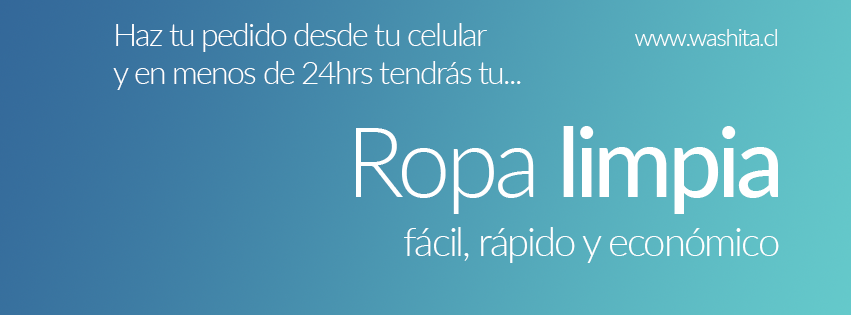
<style>
.page{position:relative;width:851px;height:315px}
.page>*{position:absolute;margin:0}
.t1{font:32px "Lato-Light";letter-spacing:-0.05em;color:#ffffff}
.t2{font:24px "Lato-Light";letter-spacing:-0.05em;color:#ffffff}
.t3{font:96px "Lato-Medium";letter-spacing:-0.05em;color:#ffffff}
.t4{font:96px "Lato-Light";letter-spacing:-0.05em;color:#ffffff}
.t5{font:40px "Lato-Light";letter-spacing:-0.05em;color:#ffffff}
</style>
<div class="page">
<p class="t1" style="left:113px;top:23px;width:408px;height:67px;text-align:right">Haz tu pedido desde tu celular <br>y en menos de 24hrs tendrás tu...</p>
<p class="t2" style="left:635px;top:29px;width:142px;height:17px">www.washita.cl</p>
<p class="t3" style="left:356px;top:126px;width:422px;height:88px"><span class="t4">Ropa </span>limpia</p>
<p class="t5" style="left:404px;top:227px;width:375px;height:36px">fácil, rápido y económico</p>
</div>
